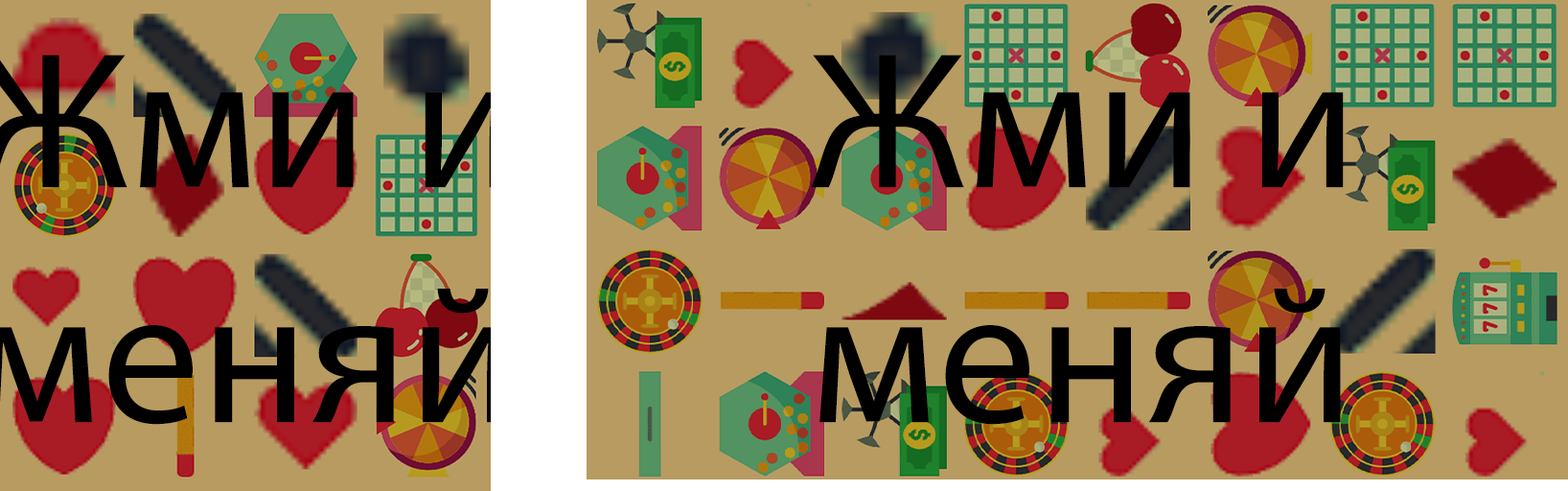
<style>
.page{position:relative;width:1568px;height:491px;background:#b79b61}
.page>*{position:absolute;margin:0}
.t1{font:195.7px "MyriadPro-Regular";letter-spacing:0.008em;color:#000000}
</style>
<div class="page">
<p class="t1" style="left:811px;top:55px;width:533px;height:370px;text-align:center">Жми и<br>меняй</p>
</div>
